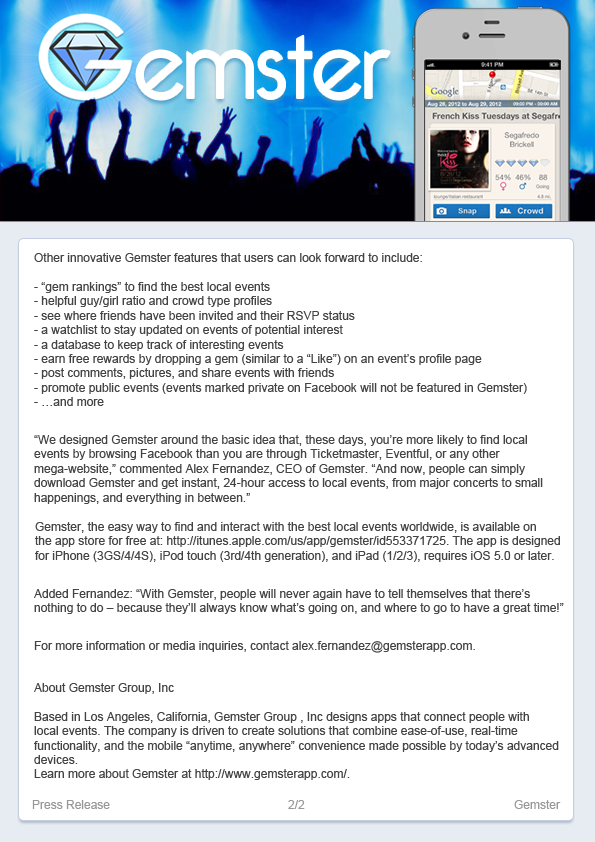
<style>
.page{position:relative;width:595px;height:842px;background:#ffffff}
.page>*{position:absolute;margin:0}
.t1{font:12px "ArialMT";color:#444444}
.t2{font:12px "ArialMT";color:#999898}
</style>
<div class="page">
<p class="t1" style="left:34px;top:253px;width:493px;height:153px">Other innovative Gemster features that users can look forward to include:<br><br>- “gem rankings” to find the best local events <br>- helpful guy/girl ratio and crowd type profiles<br>- see where friends have been invited and their RSVP status<br>- a watchlist to stay updated on events of potential interest <br>- a database to keep track of interesting events<br>- earn free rewards by dropping a gem (similar to a “Like”) on an event’s profile page<br>- post comments, pictures, and share events with friends<br>- promote public events (events marked private on Facebook will not be featured in Gemster) <br>- …and more</p>
<p class="t1" style="left:34px;top:435px;width:509px;height:69px">“We designed Gemster around the basic idea that, these days, you’re more likely to find local<br>events by browsing Facebook than you are through Ticketmaster, Eventful, or any other<br>mega-website,” commented Alex Fernandez, CEO of Gemster. “And now, people can simply<br>download Gemster and get instant, 24-hour access to local events, from major concerts to small<br>happenings, and everything in between.”</p>
<p class="t1" style="left:35px;top:522px;width:525px;height:40px">Gemster, the easy way to find and interact with the best local events worldwide, is available on<br>the app store for free at: http://itunes.apple.com/us/app/gemster/id553371725. The app is designed<br>for iPhone (3GS/4/4S), iPod touch (3rd/4th generation), and iPad (1/2/3), requires iOS 5.0 or later.</p>
<p class="t1" style="left:34px;top:589px;width:530px;height:25px">Added Fernandez: “With Gemster, people will never again have to tell themselves that there’s<br>nothing to do – because they’ll always know what’s going on, and where to go to have a great time!”</p>
<p class="t1" style="left:34px;top:641px;width:441px;height:12px">For more information or media inquiries, contact alex.fernandez@gemsterapp.com.</p>
<p class="t1" style="left:34px;top:683px;width:525px;height:97px">About Gemster Group, Inc<br><br>Based in Los Angeles, California, Gemster Group , Inc designs apps that connect people with<br>local events. The company is driven to create solutions that combine ease-of-use, real-time<br>functionality, and the mobile “anytime, anywhere” convenience made possible by today’s advanced<br>devices.<br>Learn more about Gemster at http://www.gemsterapp.com/.</p>
<p class="t2" style="left:32px;top:800px;width:78px;height:9px">Press Release</p>
<p class="t2" style="left:288px;top:800px;width:17px;height:9px">2/2</p>
<p class="t2" style="left:514px;top:800px;width:47px;height:9px">Gemster</p>
</div>
